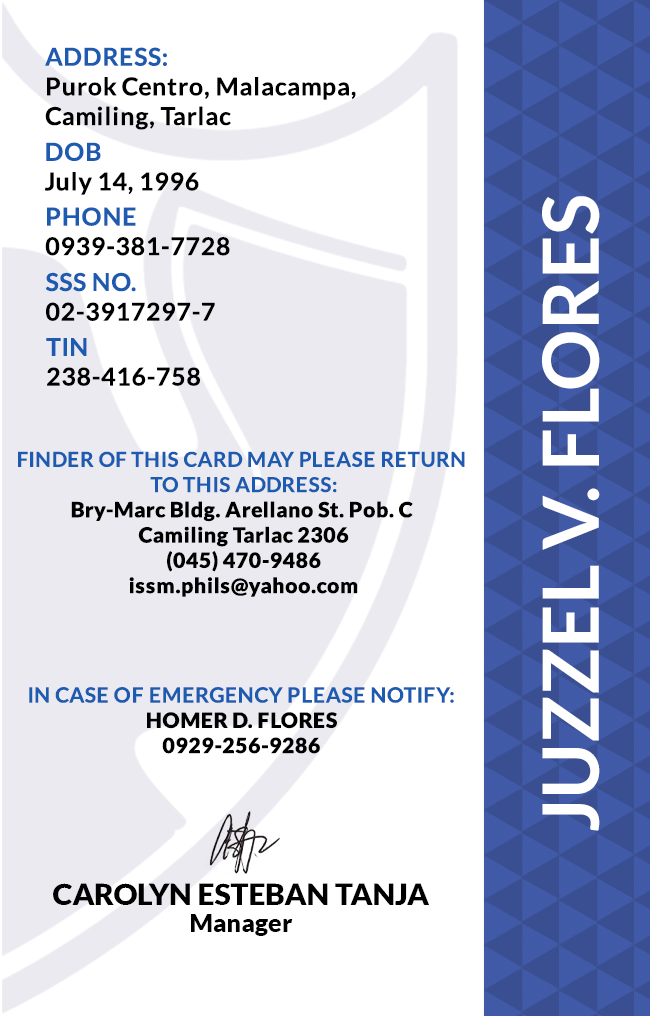
<style>
.page{position:relative;width:650px;height:1016px;background:#ffffff}
.page>*{position:absolute;margin:0}
.t1{font:24.7px/29.6px "Lato-Bold";letter-spacing:0.025em;color:#000000}
.t2{font:24.7px/29.6px "Lato-Bold";letter-spacing:0.025em;color:#1c5bb0}
.t3{font:24.7px/29.6px "Lato-Bold";letter-spacing:0.025em}
.t4{font:77.6px "Lato-Bold";color:#ffffff}
.t5{font:21.1px "Lato-Black";letter-spacing:0.025em}
.t6{font:20.5px/25.3px "Lato-Bold";letter-spacing:0.025em;text-transform:uppercase}
.t7{font:21.1px/25.3px "Lato-Bold";letter-spacing:0.025em}
.t8{font:29.5px "Lato-Black";color:#000000}
.t9{font:25px "Lato-Black";color:#000000}
</style>
<div class="page">
<p class="t1" style="left:45px;top:47px;width:311px;height:83px"><span class="t2">ADDRESS:<br></span>Purok Centro, Malacampa,<br>Camiling, Tarlac</p>
<p class="t3" style="left:45px;top:142px;width:154px;height:53px">DOB<br>July 14, 1996</p>
<p class="t4" style="left:542px;top:196px;width:58px;height:635px;rotate:-90deg">JUZZEL V. FLORES</p>
<p class="t3" style="left:45px;top:207px;width:185px;height:49px">PHONE <br>0939-381-7728</p>
<p class="t3" style="left:45px;top:272px;width:170px;height:49px">SSS NO.<br>02-3917297-7</p>
<p class="t1" style="left:46px;top:338px;width:154px;height:48px">TIN<br>238-416-758</p>
<p class="t5" style="left:18px;top:451px;width:447px;height:146px;text-align:center"><span class="t6">Finder of this card may please return <br>to this address:<br></span>Bry-Marc Bldg. Arellano St. Pob. C <br>Camiling Tarlac 2306<br>(045) 470-9486<br>issm.phils@yahoo.com</p>
<p class="t7" style="left:29px;top:687px;width:425px;height:67px;text-align:center">IN CASE OF EMERGENCY PLEASE NOTIFY:<br><span class="t5">HOMER D. FLORES<br>0929-256-9286</span></p>
<p class="t8" style="left:53px;top:883px;width:376px;height:22px">CAROLYN ESTEBAN TANJA</p>
<p class="t9" style="left:191px;top:914px;width:102px;height:22px">Manager</p>
</div>
